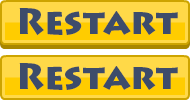
<style>
.page{position:relative;width:190px;height:100px;background:#ffd948}
.page>*{position:absolute;margin:0}
.t1{font:36px "LithosPro-Black";color:#3d4c6b}
</style>
<div class="page">
<p class="t1" style="left:19px;top:8px;width:159px;height:28px">Restart</p>
<p class="t1" style="left:19px;top:63px;width:159px;height:28px">Restart</p>
</div>
